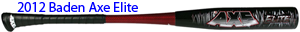
<style>
.page{position:relative;width:300px;height:32px;background:#ffffff}
.page>*{position:absolute;margin:0}
.t1{font:14px "MyriadPro-Regular";color:#0000ff}
</style>
<div class="page">
<p class="t1" style="left:17px;top:2px;width:121px;height:10px">2012 Baden Axe Elite</p>
</div>
